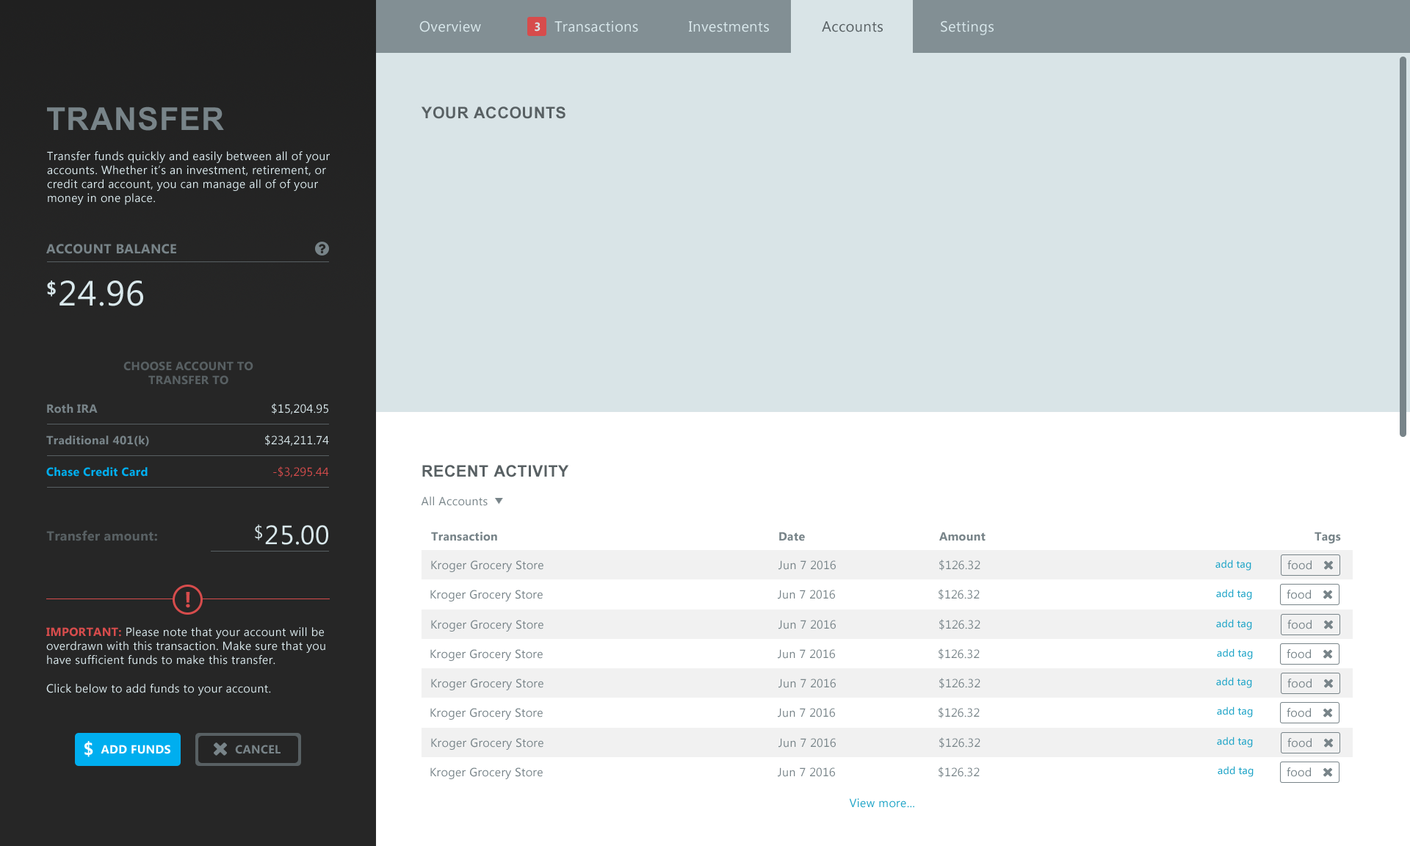
<style>
.page{position:relative;width:1410px;height:846px;background:#d9e4e7}
.page>*{position:absolute;margin:0}
.t1{font:14.7px "LaoUI";letter-spacing:0.02em;color:#d9e8ec}
.t2{font:11.7px "LaoUI-Bold";letter-spacing:0.02em;color:#d9e4e7}
.t3{font:14.7px "LaoUI";letter-spacing:0.02em;color:#586063}
.t4{font:44.1px "Utsaah-Bold";letter-spacing:0.02em;color:#788489}
.t5{font:22px "Utsaah-Bold";letter-spacing:0.02em;color:#586063}
.t6{font:11.7px "LaoUI";letter-spacing:0.02em;color:#d9e8ec}
.t7{font:13.2px "LaoUI-Bold";letter-spacing:0.02em;color:#788489}
.t8{font:17.6px "LaoUI-Bold";letter-spacing:0.02em;color:#d9e8ec}
.t9{font:35.2px "LaoUI";letter-spacing:0.02em;color:#d9e8ec}
.t10{font:11.7px "LaoUI-Bold";letter-spacing:0.02em;color:#586063}
.t11{font:11.7px "LaoUI-Bold";letter-spacing:0.02em;color:#788489}
.t12{font:11.7px "LaoUI-Bold";letter-spacing:0.02em;color:#00aeef}
.t13{font:11.7px "LaoUI";letter-spacing:0.02em;color:#d74c4c}
.t14{font:11.7px "LaoUI";letter-spacing:0.02em;color:#788489}
.t15{font:13.2px "LaoUI-Bold";letter-spacing:0.02em;color:#586063}
.t16{font:17.6px "LaoUI";letter-spacing:0.02em;color:#d9e8ec}
.t17{font:26.4px "LaoUI";letter-spacing:0.02em;color:#d9e8ec}
.t18{font:10.3px "LaoUI";letter-spacing:0.02em;color:#1ea4c7}
.t19{font:22px "LaoUI-Bold";letter-spacing:0.02em;color:#d74c4c}
.t20{font:11.7px "LaoUI-Bold";letter-spacing:0.02em;color:#d74c4c}
.t21{font:17.6px "LaoUI-Bold";letter-spacing:0.02em;color:#ffffff}
.t22{font:11.8px "LaoUI-Bold";letter-spacing:0.02em;color:#ffffff}
.t23{font:11.8px "LaoUI-Bold";letter-spacing:0.02em;color:#788489}
.t24{font:11.7px "LaoUI";letter-spacing:0.02em;color:#1ea4c7}
</style>
<div class="page">
<p class="t1" style="left:419px;top:21px;width:62px;height:11px">Overview</p>
<p class="t2" style="left:535px;top:22px;width:5px;height:10px">3</p>
<p class="t1" style="left:554px;top:21px;width:84px;height:11px">Transactions</p>
<p class="t1" style="left:689px;top:21px;width:80px;height:11px">Investments</p>
<p class="t3" style="left:822px;top:21px;width:61px;height:11px">Accounts</p>
<p class="t1" style="left:941px;top:21px;width:52px;height:14px">Settings</p>
<p class="t4" style="left:47px;top:106px;width:177px;height:25px">TRANSFER</p>
<p class="t5" style="left:421px;top:106px;width:144px;height:13px">YOUR ACCOUNTS</p>
<p class="t6" style="left:47px;top:151px;width:283px;height:54px">Transfer funds quickly and easily between all of your<br>accounts. Whether it’s an investment, retirement, or<br>credit card account, you can manage all of of your <br>money in one place.</p>
<p class="t7" style="left:46px;top:244px;width:130px;height:10px">ACCOUNT BALANCE</p>
<p class="t8" style="left:47px;top:280px;width:9px;height:17px">$</p>
<p class="t9" style="left:59px;top:280px;width:84px;height:26px">24.96</p>
<p class="t10" style="left:123px;top:361px;width:130px;height:24px;text-align:center">CHOOSE ACCOUNT TO<br>TRANSFER TO</p>
<p class="t11" style="left:47px;top:404px;width:51px;height:9px">Roth IRA</p>
<p class="t6" style="left:272px;top:403px;width:56px;height:11px">$15,204.95</p>
<p class="t11" style="left:46px;top:435px;width:103px;height:11px">Traditional 401(k)</p>
<p class="t6" style="left:265px;top:435px;width:64px;height:11px">$234,211.74</p>
<p class="t12" style="left:46px;top:467px;width:102px;height:10px">Chase Credit Card</p>
<p class="t13" style="left:273px;top:466px;width:56px;height:11px">-$3,295.44</p>
<p class="t5" style="left:422px;top:465px;width:147px;height:12px">RECENT ACTIVITY</p>
<p class="t14" style="left:421px;top:496px;width:67px;height:10px">All Accounts</p>
<p class="t15" style="left:46px;top:530px;width:111px;height:11px">Transfer amount:</p>
<p class="t16" style="left:255px;top:524px;width:7px;height:16px">$</p>
<p class="t17" style="left:265px;top:525px;width:63px;height:20px">25.00</p>
<p class="t11" style="left:431px;top:532px;width:66px;height:9px">Transaction</p>
<p class="t11" style="left:779px;top:532px;width:26px;height:9px">Date</p>
<p class="t11" style="left:939px;top:532px;width:46px;height:9px">Amount</p>
<p class="t11" style="left:1314px;top:532px;width:27px;height:11px">Tags</p>
<p class="t14" style="left:431px;top:560px;width:112px;height:12px">Kroger Grocery Store</p>
<p class="t14" style="left:778px;top:560px;width:58px;height:10px">Jun 7 2016</p>
<p class="t14" style="left:939px;top:559px;width:41px;height:12px">$126.32</p>
<p class="t18" style="left:1215px;top:559px;width:36px;height:12px">add tag</p>
<p class="t14" style="left:1287px;top:560px;width:24px;height:10px">food</p>
<p class="t19" style="left:186px;top:592px;width:4px;height:16px">!</p>
<p class="t14" style="left:430px;top:590px;width:113px;height:11px">Kroger Grocery Store</p>
<p class="t14" style="left:778px;top:590px;width:57px;height:9px">Jun 7 2016</p>
<p class="t14" style="left:938px;top:589px;width:41px;height:11px">$126.32</p>
<p class="t18" style="left:1216px;top:589px;width:36px;height:11px">add tag</p>
<p class="t14" style="left:1286px;top:590px;width:25px;height:9px">food</p>
<p class="t6" style="left:46px;top:627px;width:279px;height:68px"><span class="t20">IMPORTANT: </span>Please note that your account will be overdrawn with this transaction. Make sure that you have sufficient funds to make this transfer. <br><br>Click below to add funds to your account.</p>
<p class="t14" style="left:431px;top:620px;width:112px;height:11px">Kroger Grocery Store</p>
<p class="t14" style="left:778px;top:620px;width:58px;height:9px">Jun 7 2016</p>
<p class="t14" style="left:939px;top:619px;width:41px;height:11px">$126.32</p>
<p class="t18" style="left:1216px;top:619px;width:36px;height:11px">add tag</p>
<p class="t14" style="left:1287px;top:620px;width:24px;height:9px">food</p>
<p class="t14" style="left:430px;top:649px;width:113px;height:12px">Kroger Grocery Store</p>
<p class="t14" style="left:778px;top:649px;width:57px;height:10px">Jun 7 2016</p>
<p class="t14" style="left:938px;top:648px;width:41px;height:11px">$126.32</p>
<p class="t18" style="left:1217px;top:648px;width:36px;height:11px">add tag</p>
<p class="t14" style="left:1286px;top:649px;width:25px;height:10px">food</p>
<p class="t14" style="left:939px;top:678px;width:41px;height:11px">$126.32</p>
<p class="t18" style="left:1216px;top:677px;width:36px;height:11px">add tag</p>
<p class="t14" style="left:431px;top:678px;width:112px;height:12px">Kroger Grocery Store</p>
<p class="t14" style="left:778px;top:678px;width:58px;height:10px">Jun 7 2016</p>
<p class="t14" style="left:1287px;top:678px;width:24px;height:10px">food</p>
<p class="t14" style="left:430px;top:708px;width:113px;height:12px">Kroger Grocery Store</p>
<p class="t14" style="left:778px;top:708px;width:57px;height:9px">Jun 7 2016</p>
<p class="t14" style="left:938px;top:707px;width:41px;height:11px">$126.32</p>
<p class="t18" style="left:1217px;top:706px;width:36px;height:11px">add tag</p>
<p class="t14" style="left:1286px;top:708px;width:25px;height:9px">food</p>
<p class="t14" style="left:431px;top:738px;width:112px;height:12px">Kroger Grocery Store</p>
<p class="t14" style="left:778px;top:738px;width:58px;height:9px">Jun 7 2016</p>
<p class="t14" style="left:939px;top:737px;width:41px;height:11px">$126.32</p>
<p class="t18" style="left:1217px;top:736px;width:36px;height:11px">add tag</p>
<p class="t14" style="left:1287px;top:738px;width:24px;height:9px">food</p>
<p class="t21" style="left:84px;top:741px;width:9px;height:16px">$</p>
<p class="t22" style="left:101px;top:745px;width:69px;height:9px">ADD FUNDS</p>
<p class="t23" style="left:235px;top:745px;width:45px;height:9px">CANCEL</p>
<p class="t14" style="left:430px;top:767px;width:113px;height:12px">Kroger Grocery Store</p>
<p class="t14" style="left:778px;top:767px;width:57px;height:10px">Jun 7 2016</p>
<p class="t14" style="left:938px;top:767px;width:41px;height:11px">$126.32</p>
<p class="t18" style="left:1217px;top:766px;width:36px;height:11px">add tag</p>
<p class="t14" style="left:1286px;top:767px;width:25px;height:10px">food</p>
<p class="t24" style="left:849px;top:798px;width:65px;height:10px">View more...</p>
</div>
